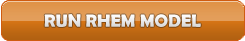
<style>
.page{position:relative;width:245px;height:41px}
.page>*{position:absolute;margin:0}
.t1{font:18px "BerlinSansFBDemi-Bold";color:#ffffff}
</style>
<div class="page">
<p class="t1" style="left:44px;top:14px;width:157px;height:13px">RUN RHEM MODEL</p>
</div>
